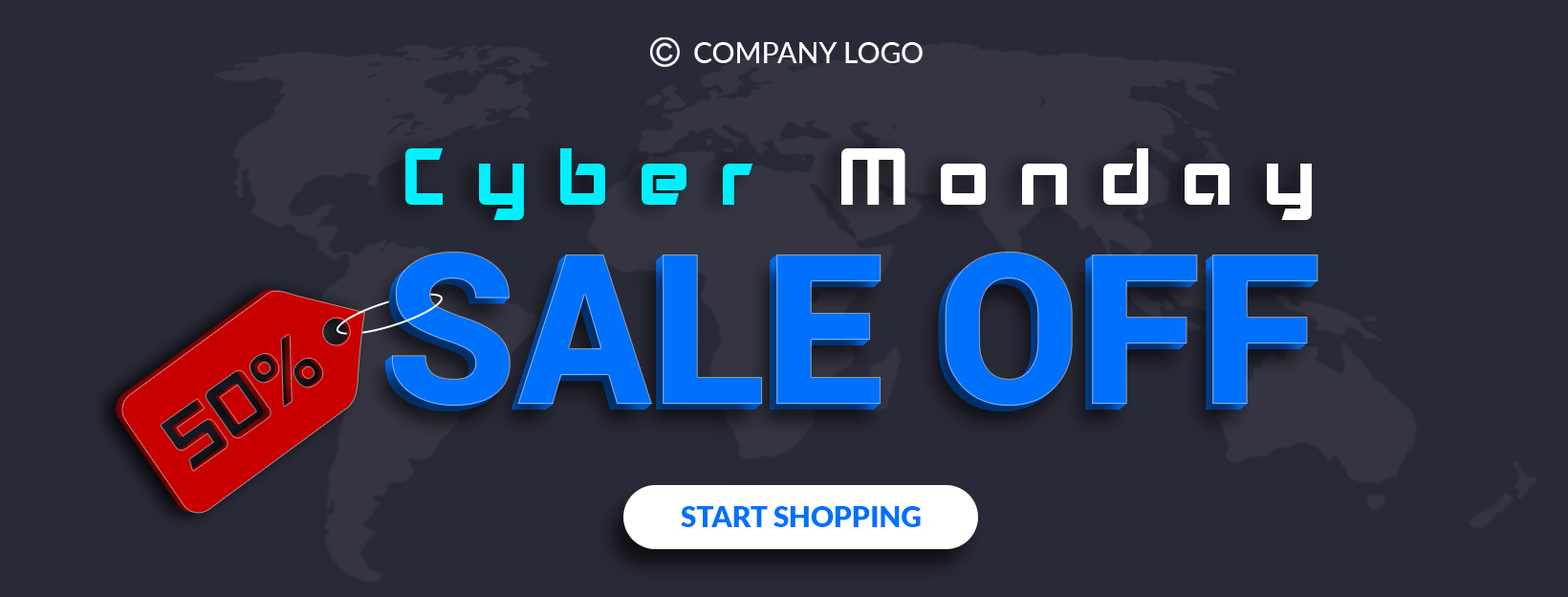
<style>
.page{position:relative;width:1568px;height:597px;background:#292a37}
.page>*{position:absolute;margin:0}
.t1{font:76.5px "Akashi";letter-spacing:0.38em;color:#ffffff}
.t2{font:76.5px "Akashi";letter-spacing:0.38em;color:#00f0ff}
.t3{font:210.3px "Roboto-Black";color:#0071fc;text-transform:uppercase}
.t4{font:28.7px "Lato-Black";color:#0071fc;text-transform:uppercase}
</style>
<div class="page">
<p class="t1" style="left:405px;top:148px;width:907px;height:72px"><span class="t2">Cyber</span> Monday</p>
<p class="t3" style="left:384px;top:257px;width:928px;height:154px">Sale Off</p>
<p class="t3" style="left:391px;top:251px;width:927px;height:154px">Sale Off</p>
<p class="t4" style="left:681px;top:506px;width:240px;height:21px">sTART sHOPPING</p>
</div>
